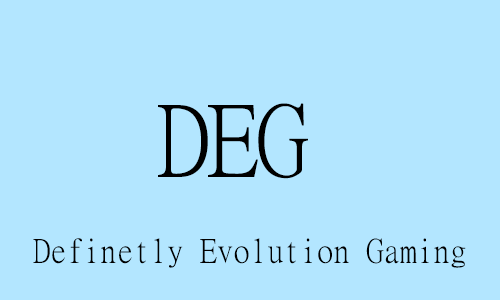
<style>
.page{position:relative;width:500px;height:300px;background:#b3e6ff}
.page>*{position:absolute;margin:0}
.t1{font:33.3px "MingLiU-ExtB";color:#000000}
.t2{font:75px "MingLiU-ExtB";color:#000000}
.t3{font:100px "MingLiU-ExtB";color:#000000}
</style>
<div class="page">
<p class="t1" style="left:33px;top:103px;width:433px;height:165px"><span class="t2">  <br></span><span class="t3">    DEG<br>  <br></span>  Definetly Evolution Gaming</p>
</div>
